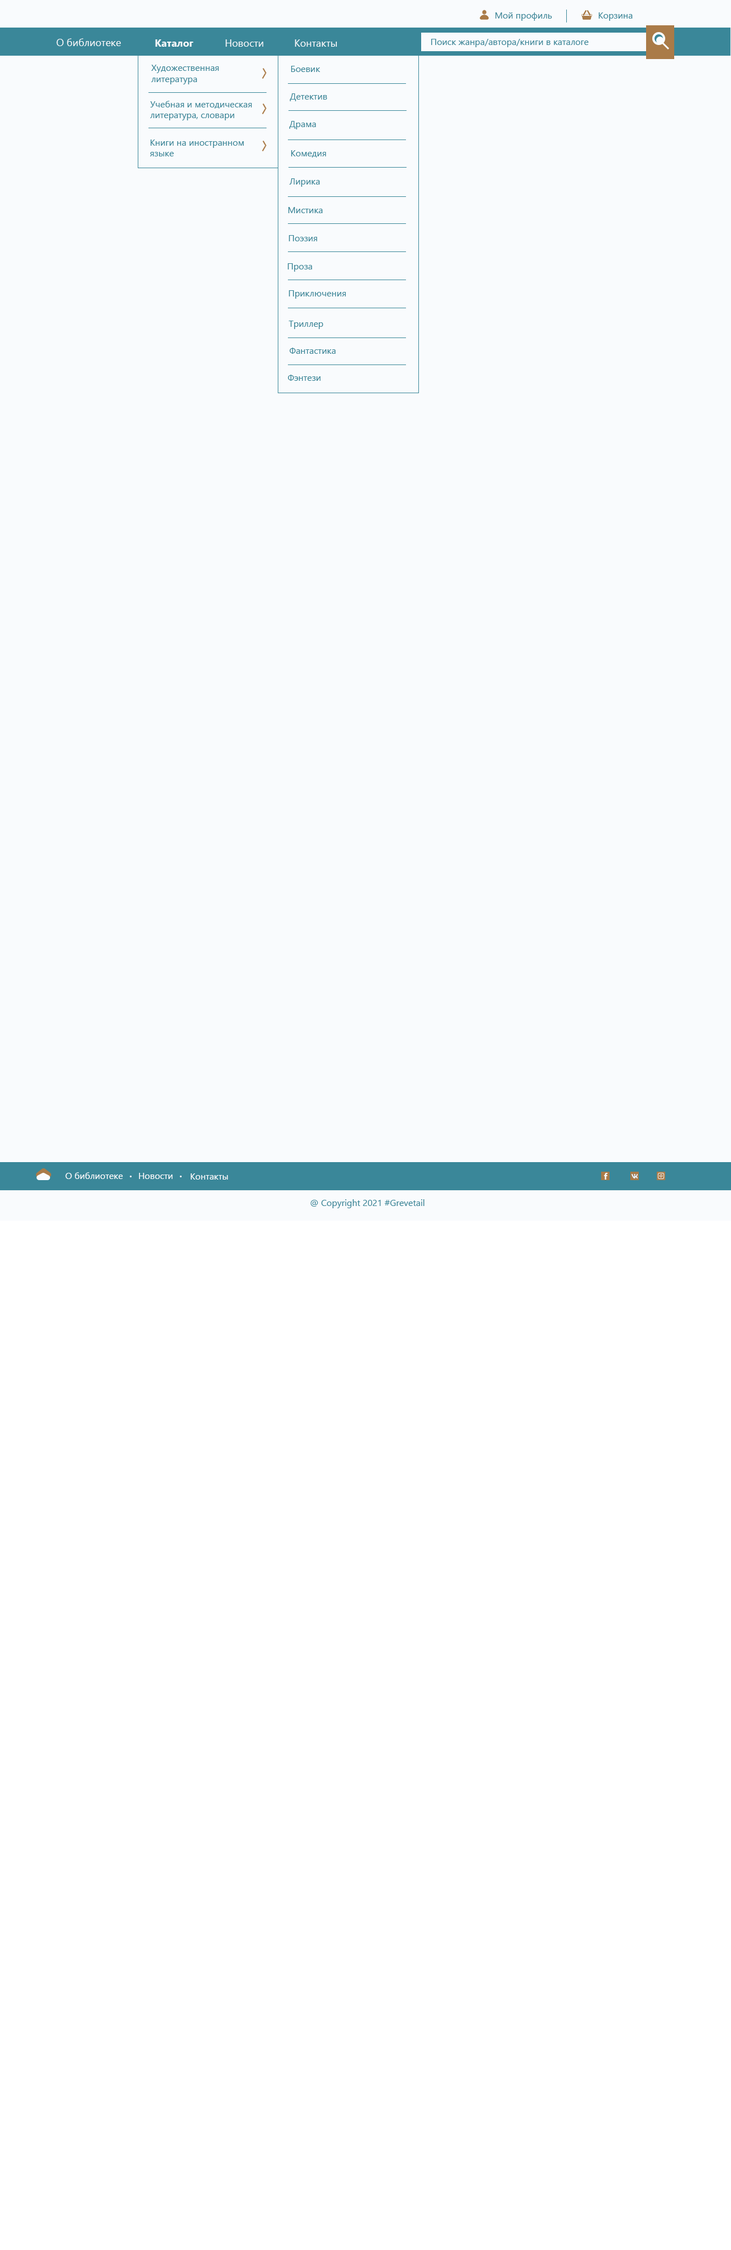
<style>
.page{position:relative;width:731px;height:2250px;background:#f9fbfd}
.page>*{position:absolute;margin:0}
.t1{font:9px "SegoeUI";color:#3a8799}
.t2{font:10.1px "SegoeUI";color:#f9fbfd}
.t3{font:10.1px "SegoeUI-Bold";color:#f9fbfd}
.t4{font:9px "SegoeUI";color:#f9fbfd}
.t5{font:9px "SegoeUI-Bold";color:#f9fbfd}
</style>
<div class="page">
<p class="t1" style="left:496px;top:12px;width:56px;height:9px">Мой профиль</p>
<p class="t1" style="left:598px;top:12px;width:35px;height:9px">Корзина</p>
<p class="t2" style="left:56px;top:38px;width:65px;height:8px">О библиотеке</p>
<p class="t3" style="left:155px;top:39px;width:39px;height:8px">Каталог</p>
<p class="t2" style="left:226px;top:39px;width:38px;height:8px">Новости</p>
<p class="t2" style="left:295px;top:39px;width:42px;height:8px">Контакты</p>
<p class="t1" style="left:431px;top:39px;width:158px;height:8px">Поиск жанра/автора/книги в каталоге</p>
<p class="t1" style="left:151px;top:65px;width:68px;height:19px">Художественная<br>литература</p>
<p class="t1" style="left:291px;top:66px;width:30px;height:6px">Боевик</p>
<p class="t1" style="left:150px;top:101px;width:102px;height:19px">Учебная и методическая литература, словари</p>
<p class="t1" style="left:290px;top:93px;width:37px;height:8px">Детектив</p>
<p class="t1" style="left:289px;top:121px;width:27px;height:8px">Драма</p>
<p class="t1" style="left:150px;top:140px;width:94px;height:16px">Книги на иностранном языке</p>
<p class="t1" style="left:291px;top:150px;width:35px;height:8px">Комедия</p>
<p class="t1" style="left:289px;top:178px;width:31px;height:9px">Лирика</p>
<p class="t1" style="left:288px;top:207px;width:35px;height:6px">Мистика</p>
<p class="t1" style="left:289px;top:235px;width:28px;height:6px">Поэзия</p>
<p class="t1" style="left:287px;top:263px;width:25px;height:9px">Проза</p>
<p class="t1" style="left:289px;top:290px;width:57px;height:9px">Приключения</p>
<p class="t1" style="left:289px;top:321px;width:34px;height:8px">Триллер</p>
<p class="t1" style="left:290px;top:348px;width:46px;height:6px">Фантастика</p>
<p class="t1" style="left:288px;top:375px;width:33px;height:6px">Фэнтези</p>
<p class="t4" style="left:65px;top:1172px;width:58px;height:7px">О библиотеке</p>
<p class="t3" style="left:129px;top:1176px;width:3px;height:1px">.</p>
<p class="t4" style="left:139px;top:1173px;width:34px;height:6px">Новости</p>
<p class="t3" style="left:179px;top:1176px;width:3px;height:1px">.</p>
<p class="t4" style="left:191px;top:1173px;width:37px;height:7px">Контакты</p>
<p class="t5" style="left:604px;top:1173px;width:4px;height:7px">f</p>
<p class="t1" style="left:310px;top:1199px;width:115px;height:9px">@ Copyright 2021 #Grevetail</p>
</div>
